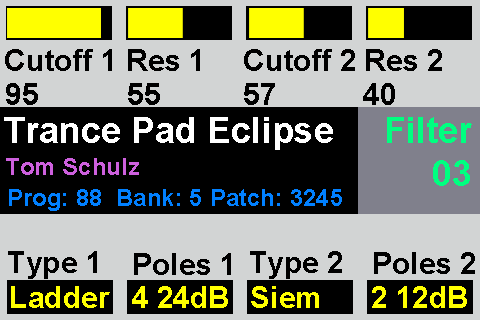
<style>
.page{position:relative;width:480px;height:320px;background:#d2d4d4}
.page>*{position:absolute;margin:0}
.t1{font:30px "Arial-BoldMT";color:#000000}
.t2{font:36px "Arial-BoldMT";color:#ffffff}
.t3{font:36px "Arial-BoldMT";color:#00ff80}
.t4{font:24px "Arial-BoldMT";color:#ce60de}
.t5{font:24px "Arial-BoldMT";color:#0180ff}
.t6{font:30px "Arial-BoldMT";color:#ffff00}
</style>
<div class="page">
<p class="t1" style="left:5px;top:49px;width:107px;height:22px">Cutoff 1</p>
<p class="t1" style="left:128px;top:49px;width:72px;height:22px">Res 1</p>
<p class="t1" style="left:244px;top:49px;width:111px;height:22px">Cutoff 2</p>
<p class="t1" style="left:366px;top:49px;width:76px;height:22px">Res 2</p>
<p class="t1" style="left:6px;top:83px;width:32px;height:22px">95</p>
<p class="t1" style="left:128px;top:83px;width:32px;height:22px">55</p>
<p class="t1" style="left:244px;top:83px;width:31px;height:22px">57</p>
<p class="t1" style="left:363px;top:83px;width:32px;height:22px">40</p>
<p class="t2" style="left:4px;top:117px;width:329px;height:33px">Trance Pad Eclipse</p>
<p class="t3" style="left:387px;top:117px;width:85px;height:69px;text-align:right">Filter<br>03</p>
<p class="t4" style="left:6px;top:158px;width:133px;height:17px">Tom Schulz</p>
<p class="t5" style="left:9px;top:189px;width:333px;height:22px">Prog: 88  Bank: 5 Patch: 3245</p>
<p class="t1" style="left:8px;top:251px;width:89px;height:28px">Type 1</p>
<p class="t1" style="left:134px;top:253px;width:97px;height:22px">Poles 1</p>
<p class="t1" style="left:250px;top:251px;width:92px;height:28px">Type 2</p>
<p class="t1" style="left:374px;top:252px;width:101px;height:22px">Poles 2</p>
<p class="t6" style="left:11px;top:286px;width:99px;height:22px">Ladder</p>
<p class="t6" style="left:132px;top:286px;width:96px;height:22px">4 24dB</p>
<p class="t6" style="left:251px;top:286px;width:68px;height:22px">Siem</p>
<p class="t6" style="left:372px;top:286px;width:95px;height:22px">2 12dB</p>
</div>
